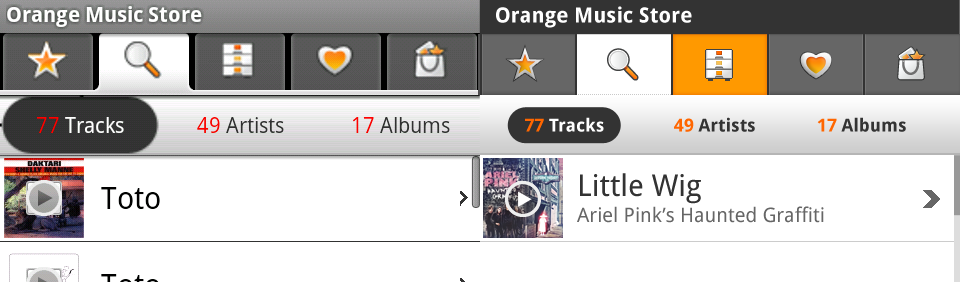
<style>
.page{position:relative;width:960px;height:282px;background:#ffffff}
.page>*{position:absolute;margin:0}
.t1{font:21px "DroidSans-Bold";color:#ffffff}
.t2{font:18px "DroidSans-Bold";color:#ffffff}
.t3{font:18px "DroidSans-Bold";color:#ff6600}
.t4{font:18px "DroidSans-Bold";color:#333333}
.t5{font:20px/26px "DroidSans";color:#666666}
.t6{font:30px/32px "DroidSans";color:#333333}
</style>
<div class="page">
<p class="t1" style="left:496px;top:6px;width:196px;height:22px">Orange Music Store</p>
<p class="t2" style="left:525px;top:117px;width:79px;height:15px"><span class="t3">77</span> Tracks</p>
<p class="t4" style="left:674px;top:117px;width:81px;height:15px"><span class="t3">49 </span>Artists</p>
<p class="t4" style="left:817px;top:117px;width:89px;height:15px"><span class="t3">17</span> Albums</p>
<p class="t5" style="left:577px;top:173px;width:247px;height:50px"><span class="t6">Little Wig<br></span>Ariel Pink’s Haunted Graffiti</p>
</div>
